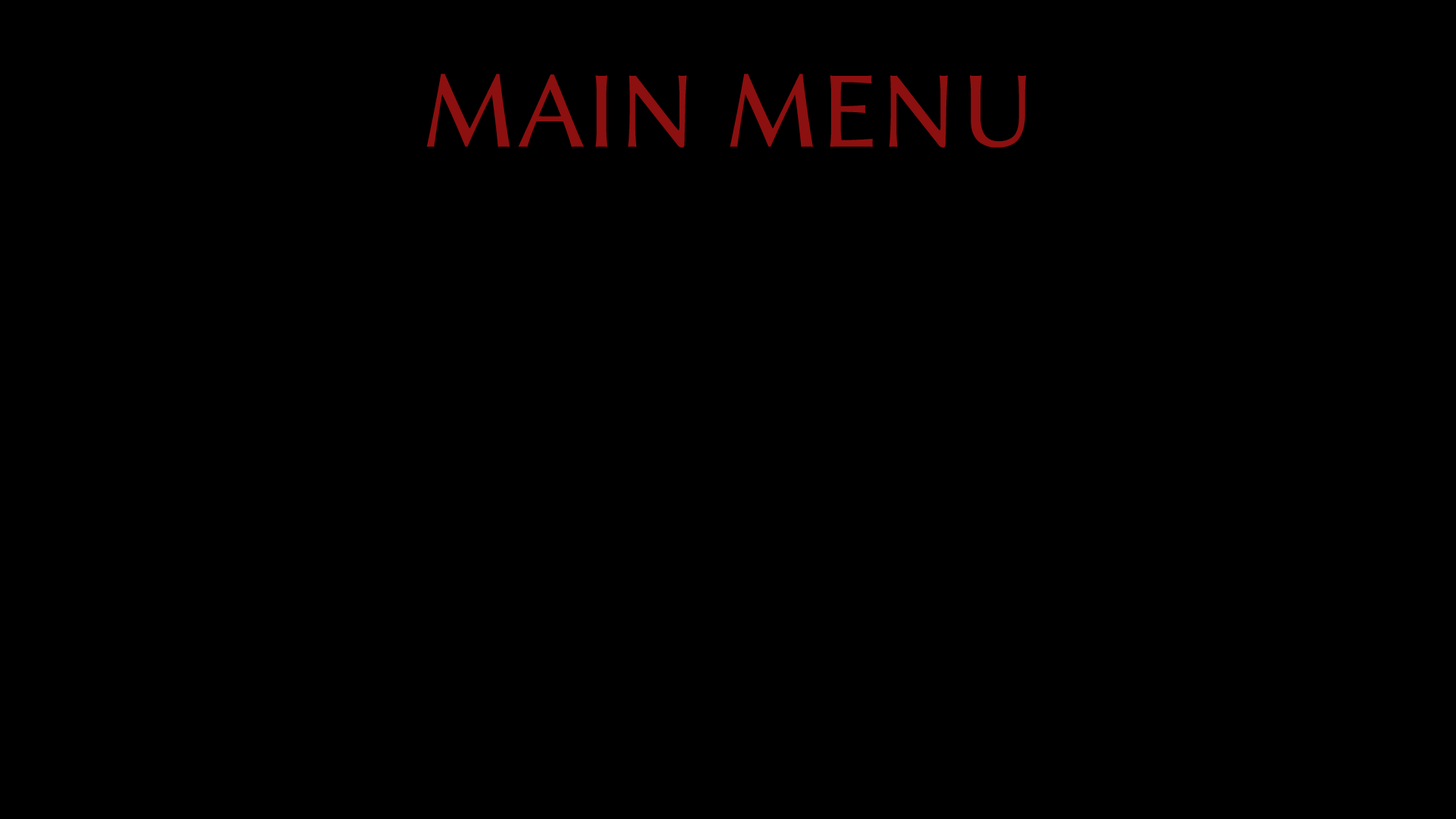
<style>
.page{position:relative;width:1456px;height:819px;background:#000000}
.page>*{position:absolute;margin:0}
.t1{font:109.2px "LinBiolinum";color:#8c1010}
</style>
<div class="page">
<p class="t1" style="left:427px;top:74px;width:600px;height:74px">MAIN MENU</p>
</div>
